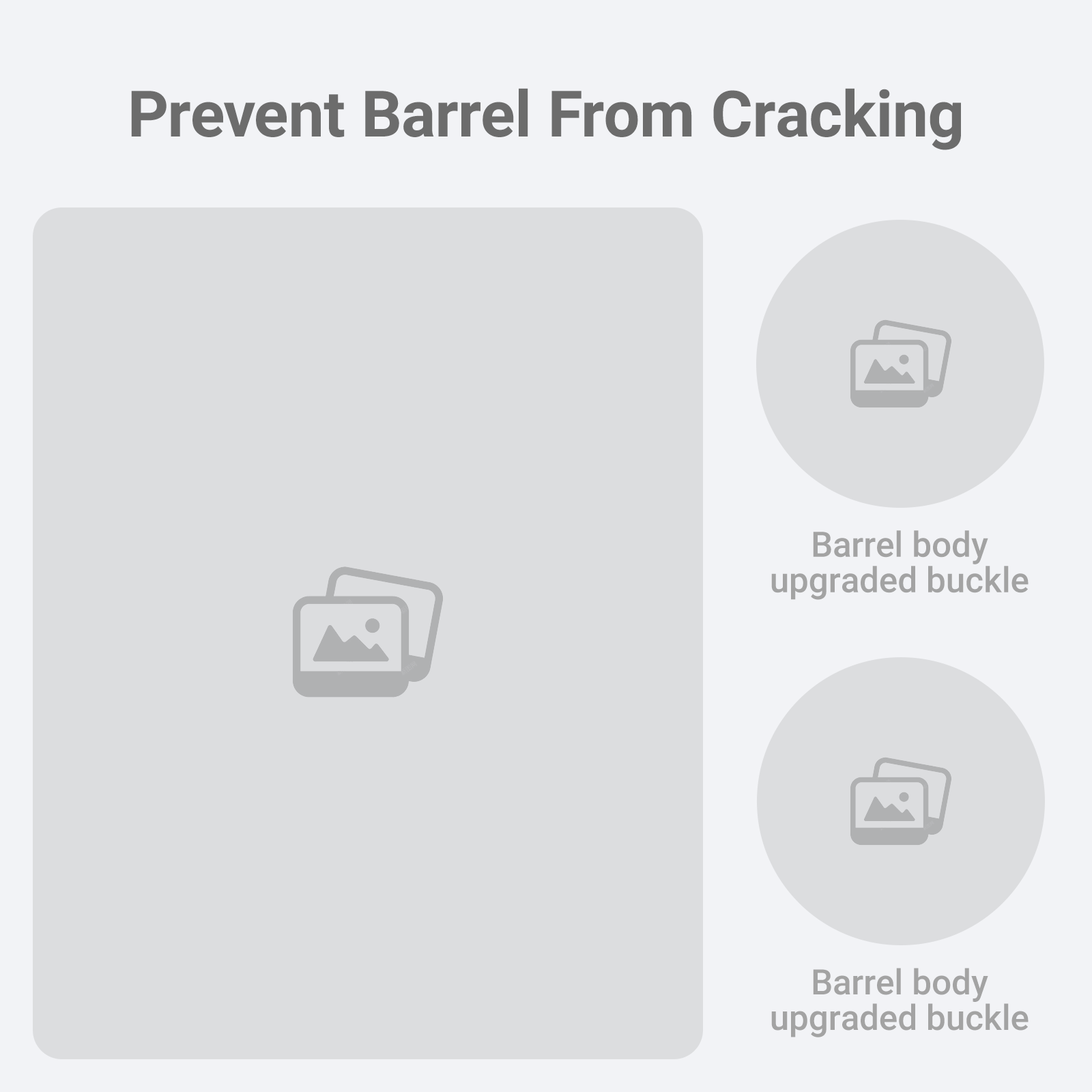
<style>
.page{position:relative;width:1092px;height:1092px;background:#dcdddf}
.page>*{position:absolute;margin:0}
.t1{font:64.1px "Roboto-Bold";color:#6c6c6c}
.t2{font:34.9px/35.5px "Roboto-Medium";color:#a3a3a3}
</style>
<div class="page">
<p class="t1" style="left:131px;top:88px;width:830px;height:62px">Prevent Barrel From Cracking</p>
<p class="t2" style="left:771px;top:530px;width:258px;height:70px;text-align:center">Barrel body<br>upgraded buckle</p>
<p class="t2" style="left:771px;top:968px;width:258px;height:69px;text-align:center">Barrel body<br>upgraded buckle</p>
</div>
